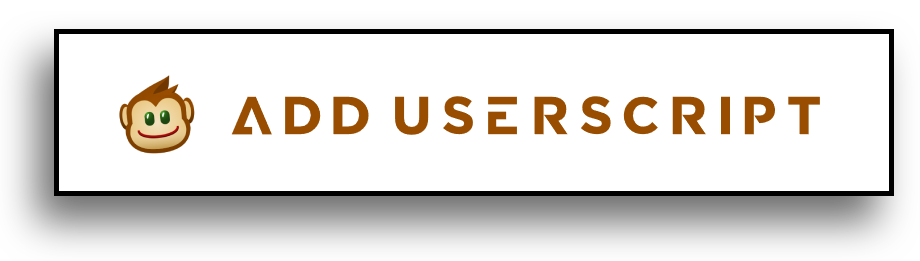
<style>
.page{position:relative;width:920px;height:261px;background:#ffffff}
.page>*{position:absolute;margin:0}
.t1{font:53px "BabaPro-Bold";color:#984d00}
</style>
<div class="page">
<p class="t1" style="left:231px;top:96px;width:589px;height:39px">Add USERSCRIPT</p>
</div>
